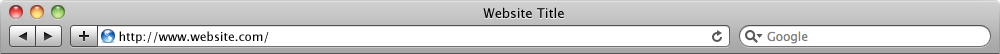
<style>
.page{position:relative;width:1000px;height:54px;background:#ffffff}
.page>*{position:absolute;margin:0}
.t1{font:13px "LucidaGrande";color:#000000}
.t2{font:12px "LucidaGrande";color:#000000}
</style>
<div class="page">
<p class="t1" style="left:483px;top:7px;width:81px;height:11px">Website Title</p>
<p class="t2" style="left:119px;top:31px;width:150px;height:13px">http://www.website.com/</p>
</div>
